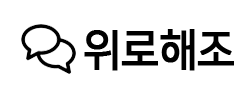
<style>
.page{position:relative;width:250px;height:100px;background:#ffffff}
.page>*{position:absolute;margin:0}
.t1{font:45px "LeferiBaseType-Regular";letter-spacing:-0.05em;color:#000000;font-weight:bold;scale:0.89 1}
</style>
<div class="page">
<p class="t1" style="left:84px;top:29px;width:150px;height:42px">위로해조</p>
</div>
